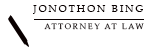
<style>
.page{position:relative;width:150px;height:50px;background:#ffffff}
.page>*{position:absolute;margin:0}
.t1{font:10px "PalatinoLinotype-Roman";letter-spacing:0.2em;color:#090000}
.t2{font:8px "PalatinoLinotype-Roman";letter-spacing:0.2em}
</style>
<div class="page">
<p class="t1" style="left:33px;top:5px;width:110px;height:9px">JONOTHON BING</p>
<p class="t2" style="left:44px;top:23px;width:100px;height:7px">ATTORNEY AT LAW</p>
</div>
